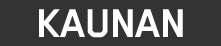
<style>
.page{position:relative;width:221px;height:46px;background:#333333}
.page>*{position:absolute;margin:0}
.t1{font:46.6px "BlenderPro-Bold";letter-spacing:-0.02em;color:#ffffff;text-transform:uppercase}
</style>
<div class="page">
<p class="t1" style="left:39px;top:9px;width:144px;height:29px">KAUNAN</p>
</div>
